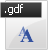
<style>
.page{position:relative;width:48px;height:50px}
.page>*{position:absolute;margin:0}
.t1{font:11px "Tahoma";color:#ffffff}
</style>
<div class="page">
<p class="t1" style="left:5px;top:4px;width:18px;height:11px">.gdf</p>
</div>
